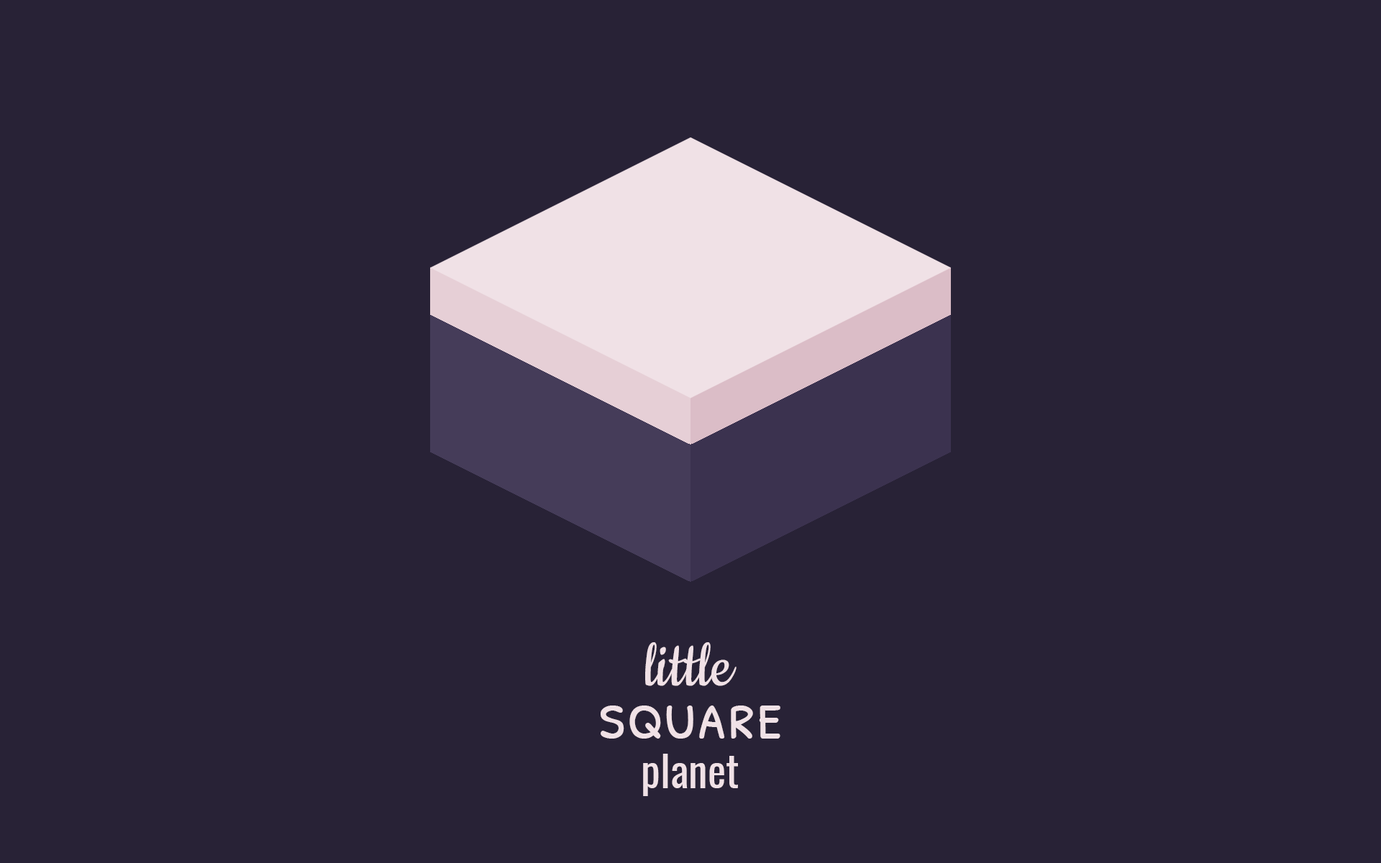
<style>
.page{position:relative;width:1381px;height:863px;background:#282236}
.page>*{position:absolute;margin:0}
.t1{font:71.9px "Cookie-Regular";color:#ebebeb}
.t2{font:71.9px "PatrickHandSC-Regular";color:#ebebeb}
.t3{font:43.2px "Oswald-Regular";color:#ebebeb}
</style>
<div class="page">
<p class="t1" style="left:645px;top:642px;width:92px;height:44px">little</p>
<p class="t2" style="left:601px;top:706px;width:180px;height:33px">square</p>
<p class="t3" style="left:643px;top:754px;width:95px;height:42px">planet</p>
</div>
